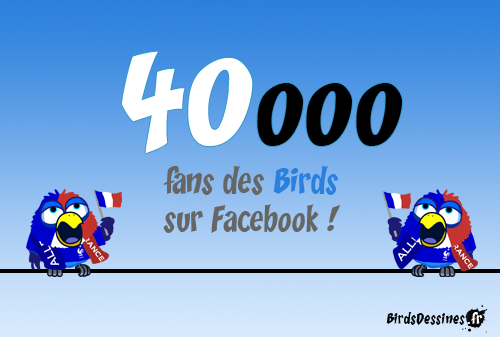
<style>
.page{position:relative;width:500px;height:337px}
.page>*{position:absolute;margin:0}
.t1{font:83px "Yikes";color:#000000}
.t2{font:116px "Yikes";color:#ffffff}
.t3{font:32px "Yikes";color:#666666}
.t4{font:32px "Yikes";color:#2c80dd}
</style>
<div class="page">
<p class="t1" style="left:122px;top:51px;width:280px;height:102px"><span class="t2">40</span>000</p>
<p class="t3" style="left:163px;top:166px;width:178px;height:67px;text-align:center">fans des <span class="t4">Birds<br></span>sur Facebook !</p>
</div>
